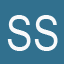
<style>
.page{position:relative;width:64px;height:64px;background:#31708e}
.page>*{position:absolute;margin:0}
.t1{font:46.5px "ArialMT";letter-spacing:0.01em;color:#f8f9fa;scale:0.86 1}
</style>
<div class="page">
<p class="t1" style="left:7px;top:15px;width:51px;height:36px">SS</p>
</div>
